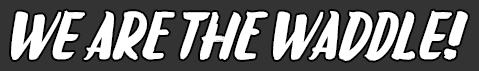
<style>
.page{position:relative;width:479px;height:71px;background:#333333}
.page>*{position:absolute;margin:0}
.t1{font:72px "LiebeDoris-BoldItalic";color:#ffffff}
</style>
<div class="page">
<p class="t1" style="left:11px;top:10px;width:457px;height:51px">We are the Waddle!</p>
</div>
